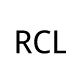
<style>
.page{position:relative;width:80px;height:80px;background:#ffffff}
.page>*{position:absolute;margin:0}
.t1{font:31.8px "DroidSans";color:#000000}
</style>
<div class="page">
<p class="t1" style="left:16px;top:30px;width:50px;height:24px">RCL</p>
</div>
